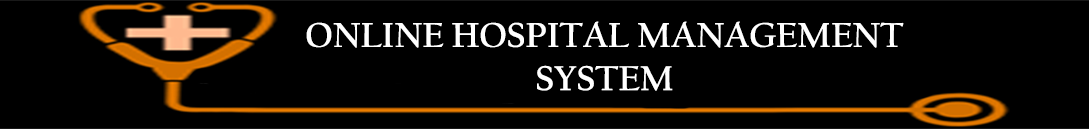
<style>
.page{position:relative;width:1089px;height:129px;background:#000000}
.page>*{position:absolute;margin:0}
.t1{font:36px "CalifornianFB-Bold";color:#ffffff}
</style>
<div class="page">
<p class="t1" style="left:306px;top:21px;width:598px;height:70px;text-align:center">ONLINE HOSPITAL MANAGEMENT SYSTEM</p>
</div>
